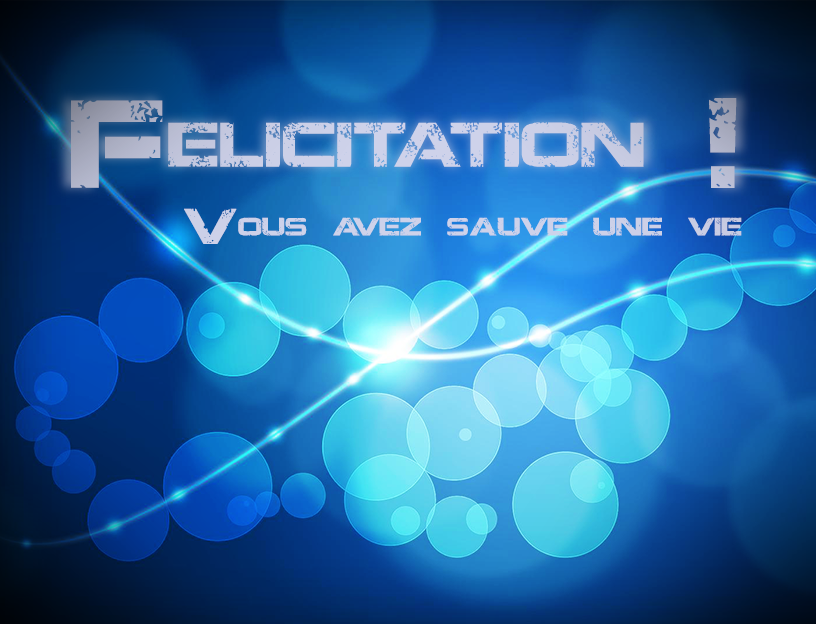
<style>
.page{position:relative;width:816px;height:624px}
.page>*{position:absolute;margin:0}
.t1{font:125px "JacintoSans";color:#ced2ea}
.t2{font:50px "JacintoSans";color:#ced2ea}
</style>
<div class="page">
<p class="t1" style="left:71px;top:98px;width:666px;height:90px">Felicitation !</p>
<p class="t2" style="left:184px;top:208px;width:558px;height:36px">Vous avez sauve une vie</p>
</div>
